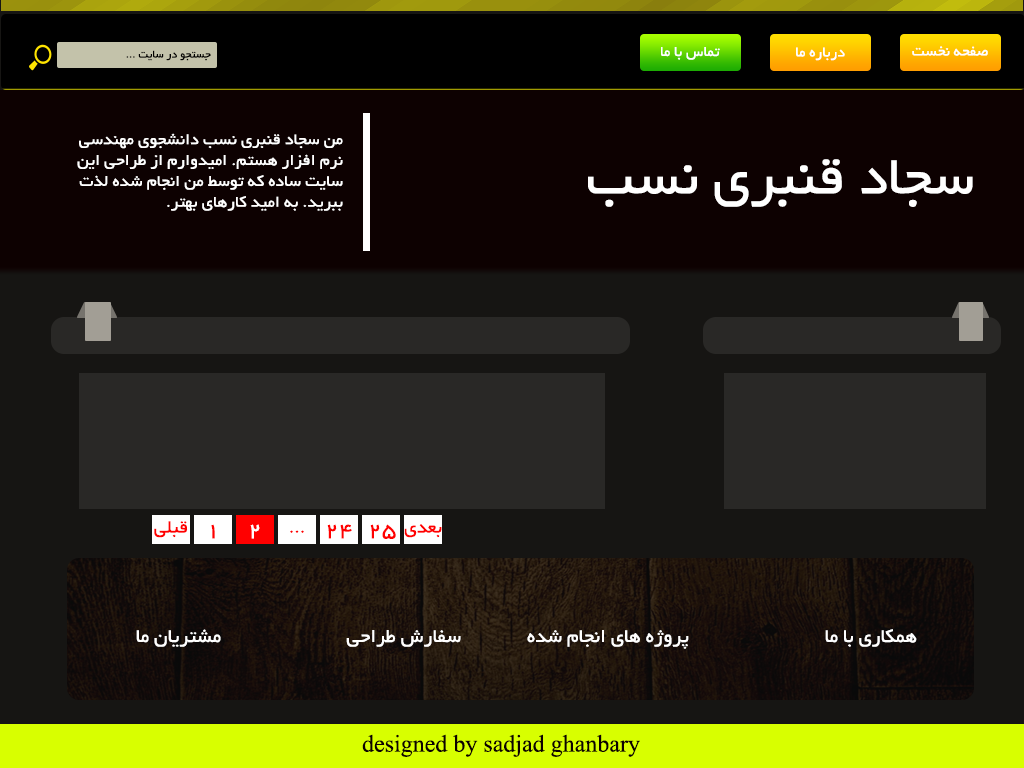
<style>
.page{position:relative;width:1024px;height:768px;background:#161513}
.page>*{position:absolute;margin:0}
.t1{font:12px "BYekan";color:#010000}
.t2{font:16px "BYekan";color:#ffffff}
.t3{font:17.4px "BYekan";color:#ffffff;scale:1.04 1}
.t4{font:60px "BYekan";color:#ffffff}
.t5{font:20px "BYekan";color:#ff0000}
.t6{font:24px "BYekan";color:#ff0000}
.t7{font:24px "BYekan";color:#ffffff}
.t8{font:21px "BYekan";color:#ffffff}
.t9{font:24px "TimesNewRomanPSMT";color:#0d0101}
</style>
<div class="page">
<p class="t1" style="left:126px;top:50px;width:85px;height:11px">جستجو در سایت ...</p>
<p class="t2" style="left:661px;top:47px;width:59px;height:13px">تماس با ما</p>
<p class="t2" style="left:796px;top:47px;width:49px;height:14px">درباره ما</p>
<p class="t2" style="left:912px;top:46px;width:76px;height:10px">صفحه نخست</p>
<p class="t3" style="left:77px;top:133px;width:266px;height:78px">من سجاد قنبری نسب دانشجوی مهندسی نرم افزار هستم. امیدوارم از طراحی این سایت ساده که توسط من انجام شده لذت ببرید. به امید کارهای بهتر.</p>
<p class="t4" style="left:588px;top:159px;width:385px;height:48px">سجاد قنبری نسب</p>
<p class="t5" style="left:154px;top:521px;width:34px;height:17px">قبلی</p>
<p class="t6" style="left:211px;top:524px;width:4px;height:15px">1</p>
<p class="t7" style="left:250px;top:524px;width:10px;height:15px">2</p>
<p class="t5" style="left:290px;top:530px;width:14px;height:3px">...</p>
<p class="t6" style="left:327px;top:524px;width:25px;height:15px">24</p>
<p class="t6" style="left:370px;top:524px;width:26px;height:15px">25</p>
<p class="t5" style="left:404px;top:524px;width:38px;height:14px">بعدی</p>
<p class="t8" style="left:136px;top:629px;width:85px;height:18px">مشتریان ما</p>
<p class="t8" style="left:346px;top:630px;width:115px;height:17px">سفارش طراحی</p>
<p class="t8" style="left:527px;top:630px;width:162px;height:19px">پروژه های انجام شده</p>
<p class="t8" style="left:825px;top:629px;width:92px;height:18px">همکاری با ما</p>
<p class="t9" style="left:362px;top:734px;width:278px;height:23px">designed by sadjad ghanbary</p>
</div>
